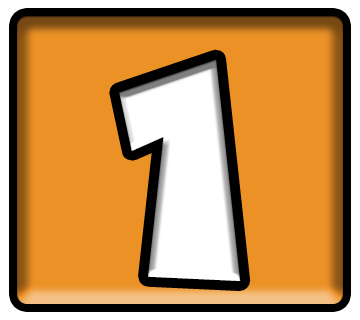
<style>
.page{position:relative;width:360px;height:320px;background:#ec9126}
.page>*{position:absolute;margin:0}
.t1{font:303.3px "Funhouse";color:#ffffff;scale:0.91 1}
</style>
<div class="page">
<p class="t1" style="left:119px;top:59px;width:122px;height:222px">1</p>
</div>
